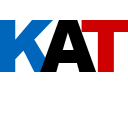
<style>
.page{position:relative;width:128px;height:128px;background:#ffffff}
.page>*{position:absolute;margin:0}
.t1{font:72px "Arial-Black";color:#0066bc}
.t2{font:72px "Arial-Black";color:#000000}
.t3{font:72px "Arial-Black";color:#ce0000}
</style>
<div class="page">
<p class="t1" style="left:0px;top:20px;width:54px;height:52px">K</p>
<p class="t2" style="left:40px;top:20px;width:56px;height:52px">A</p>
<p class="t3" style="left:81px;top:20px;width:49px;height:52px">T</p>
</div>
